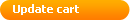
<style>
.page{position:relative;width:130px;height:20px}
.page>*{position:absolute;margin:0}
.t1{font:11px "Tahoma-Bold";color:#fefefe}
</style>
<div class="page">
<p class="t1" style="left:13px;top:4px;width:66px;height:11px">Update cart</p>
</div>
